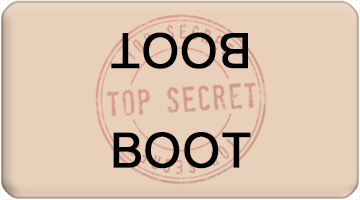
<style>
.page{position:relative;width:360px;height:200px;background:#e8d0bb}
.page>*{position:absolute;margin:0}
.t1{font:48px "ArialMT";color:#000000;font-weight:bold}
</style>
<div class="page">
<p class="t1" style="left:111px;top:32px;width:137px;height:37px;rotate:180deg">BOOT</p>
<p class="t1" style="left:113px;top:132px;width:138px;height:37px">BOOT</p>
</div>
